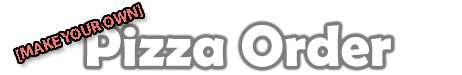
<style>
.page{position:relative;width:462px;height:75px;background:#ffffff}
.page>*{position:absolute;margin:0}
.t1{font:58px "BerlinSansFBDemi-Bold";color:#ffffff}
.t2{font:58px "AnotherTypewriter";color:#000000}
</style>
<div class="page">
<p class="t1" style="left:86px;top:25px;width:305px;height:42px"><span class="t2">  </span>Pizza Order</p>
</div>
